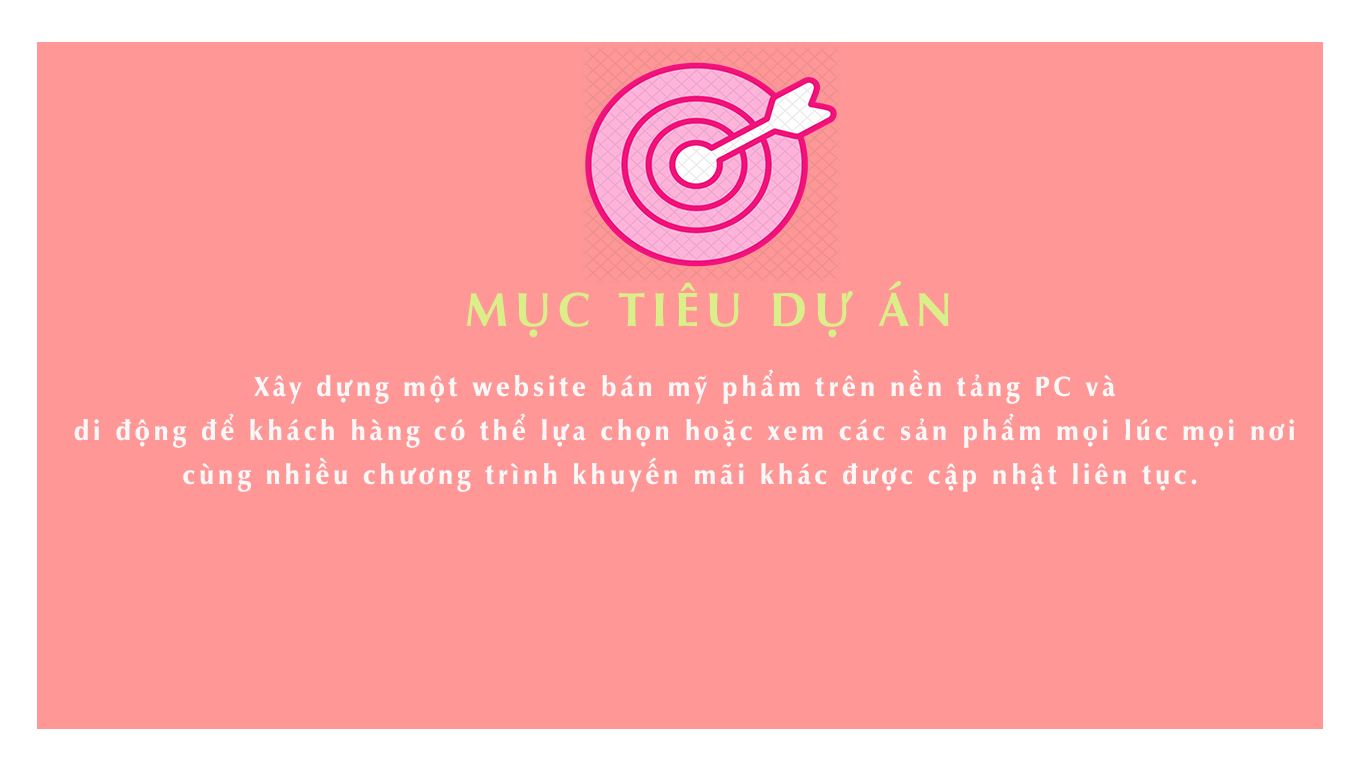
<style>
.page{position:relative;width:1366px;height:768px;background:#ff9797}
.page>*{position:absolute;margin:0}
.t1{font:48px "UVNNhanBold";letter-spacing:0.15em;color:#daee8a;text-transform:uppercase}
.t2{font:28px/22px "UVNNhanNang";letter-spacing:0.15em;color:#f8f8f8;scale:0.92 1}
</style>
<div class="page">
<p class="t1" style="left:466px;top:281px;width:483px;height:57px">mục tiêu dự án</p>
<p class="t2" style="left:74px;top:369px;width:1220px;height:123px;text-align:center">Xây dựng một website bán mỹ phẩm trên nền tảng PC và <br><br>di động để khách hàng có thể lựa chọn hoặc xem các sản phẩm mọi lúc mọi nơi <br><br>cùng nhiều chương trình khuyến mãi khác được cập nhật liên tục.</p>
</div>
